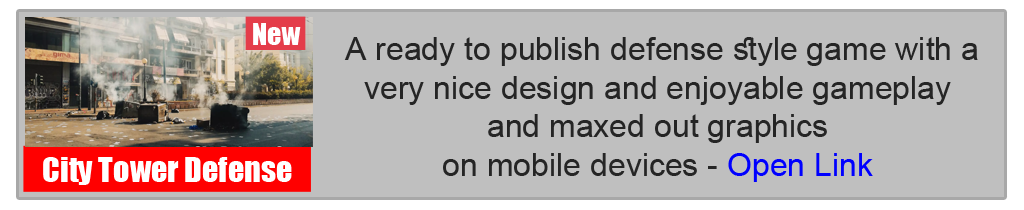
<style>
.page{position:relative;width:1024px;height:210px;background:#bfbfbf}
.page>*{position:absolute;margin:0}
.t1{font:32px "ArialMT";color:#252525}
.t2{font:32px "ArialMT";color:#0000ff}
.t3{font:32px "Impact";color:#ffffff}
</style>
<div class="page">
<p class="t1" style="left:344px;top:37px;width:634px;height:145px;text-align:center">A ready to publish defense style game with a <br>very nice design and enjoyable gameplay<br> and maxed out graphics <br>on mobile devices - <span class="t2">Open Link</span></p>
<p class="t3" style="left:43px;top:157px;width:249px;height:28px">City Tower Defense</p>
</div>
